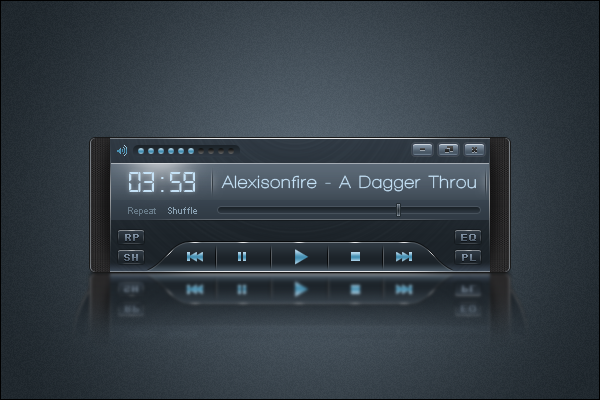
<style>
.page{position:relative;width:600px;height:400px}
.page>*{position:absolute;margin:0}
.t1{font:30px "Digital-7Mono";color:#c5e2f7}
.t2{font:18px "WalkwayBold";letter-spacing:0.05em;color:#c5e2f7}
.t3{font:9px "ArialMT";color:#697c8a}
.t4{font:9px "ArialMT";color:#8ca3b4}
.t5{font:10px "ArialMT";font-weight:bold}
</style>
<div class="page">
<p class="t1" style="left:129px;top:172px;width:66px;height:20px">03:59</p>
<p class="t2" style="left:221px;top:175px;width:255px;height:17px">Alexisonfire - A Dagger Throu</p>
<p class="t3" style="left:128px;top:207px;width:28px;height:9px">Repeat</p>
<p class="t4" style="left:168px;top:207px;width:29px;height:7px">Shuffle</p>
<p class="t5" style="left:125px;top:234px;width:14px;height:7px">RP</p>
<p class="t5" style="left:461px;top:234px;width:15px;height:7px">EQ</p>
<p class="t5" style="left:124px;top:254px;width:14px;height:7px">SH</p>
<p class="t5" style="left:462px;top:254px;width:14px;height:7px">PL</p>
</div>
